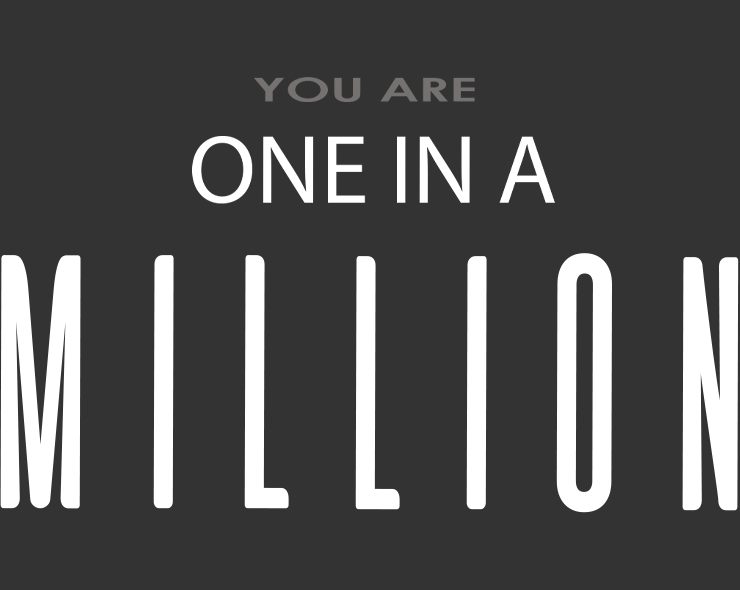
<style>
.page{position:relative;width:740px;height:590px;background:#333333}
.page>*{position:absolute;margin:0}
.t1{font:32.8px "CenturyGothic-Bold";color:#757171;scale:1.63 1}
.t2{font:97.9px "CenturyGothic-Bold";color:#ffffff}
.t3{font:361.6px "aliensandcows";color:#ffffff;scale:0.79 1}
</style>
<div class="page">
<p class="t1" style="left:254px;top:77px;width:221px;height:25px">YOU ARE</p>
<p class="t2" style="left:192px;top:136px;width:363px;height:68px">ONE IN A</p>
<p class="t3" style="left:0px;top:253px;width:739px;height:260px">MILLION</p>
</div>
